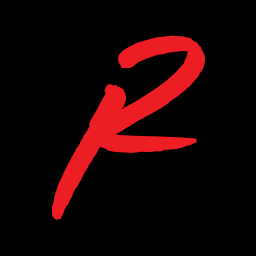
<style>
.page{position:relative;width:256px;height:256px;background:#000000}
.page>*{position:absolute;margin:0}
.t1{font:250px "TigerWalk";letter-spacing:-0.045em;color:#ed1d24;scale:1.25 1}
</style>
<div class="page">
<p class="t1" style="left:52px;top:35px;width:153px;height:185px">R</p>
</div>
